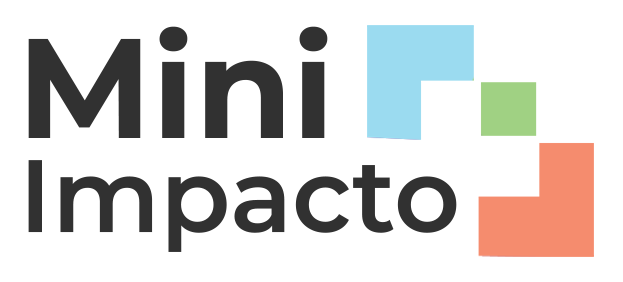
<style>
.page{position:relative;width:623px;height:282px;background:#ffffff}
.page>*{position:absolute;margin:0}
.t1{font:141.4px "MontserratRoman-Bold";color:#313131}
.t2{font:102.6px "MontserratRoman-SemiBold";color:#313131}
</style>
<div class="page">
<p class="t1" style="left:28px;top:26px;width:300px;height:112px">Mini</p>
<p class="t2" style="left:28px;top:160px;width:429px;height:92px">Impacto</p>
</div>
